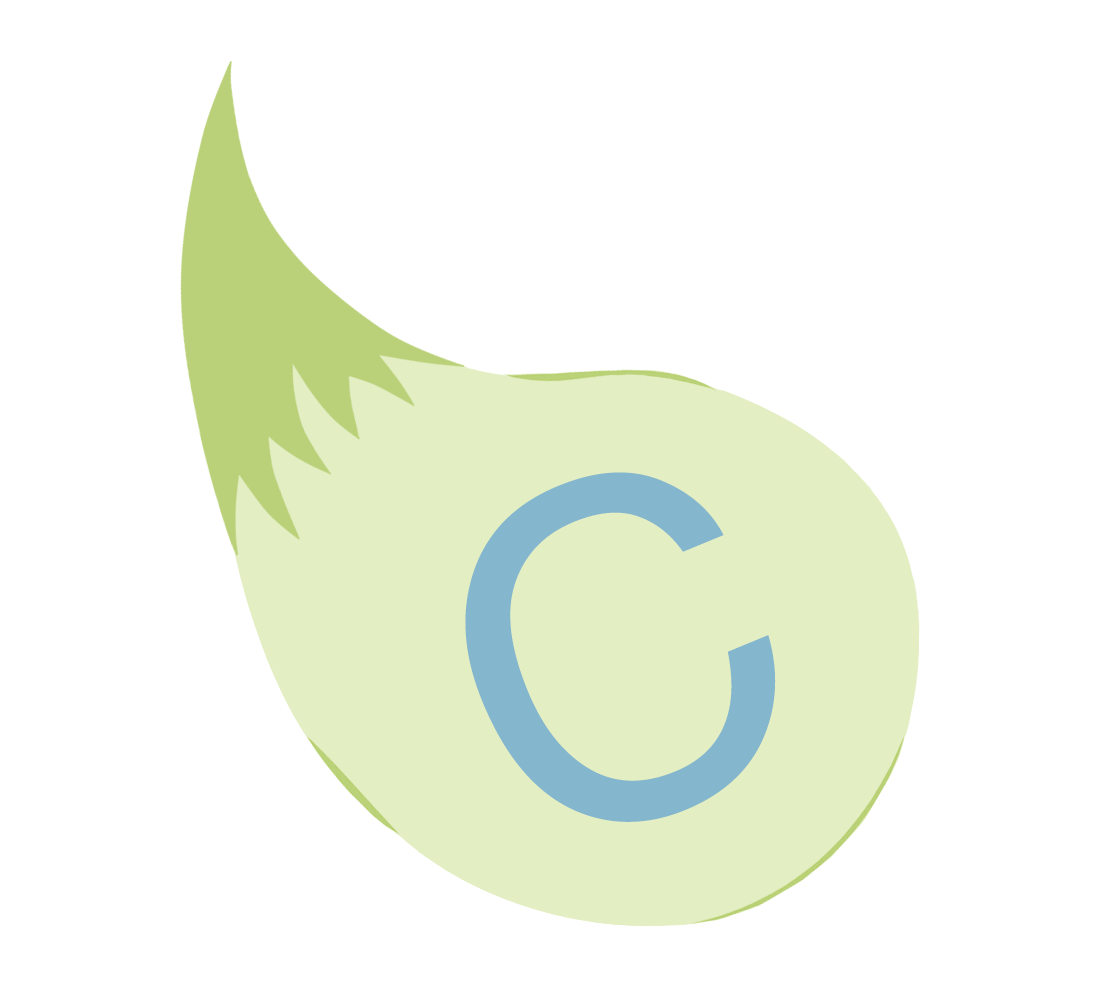
<style>
.page{position:relative;width:1100px;height:988px;background:#ffffff}
.page>*{position:absolute;margin:0}
.t1{font:460px "Helvetica";color:#84b6cd}
</style>
<div class="page">
<p class="t1" style="left:465px;top:472px;width:311px;height:350px;rotate:-22deg">C</p>
</div>
